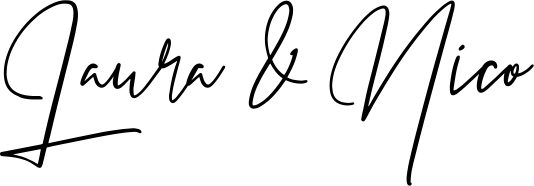
<style>
.page{position:relative;width:534px;height:186px;background:#ffffff}
.page>*{position:absolute;margin:0}
.t1{font:140px "PrestigeSignatureScript-Demo";color:#000000}
</style>
<div class="page">
<p class="t1" style="left:0px;top:0px;width:534px;height:186px">Laura &amp; Nico</p>
</div>
